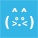
<style>
.page{position:relative;width:38px;height:38px;background:#33b5e5}
.page>*{position:absolute;margin:0}
.t1{font:14.2px "Arial-BoldMT";color:#ffffff}
.t2{font:14.2px "ArialMT";color:#ffffff}
.t3{font:10.7px "Arial-BoldMT";color:#ffffff}
.t4{font:5.3px "ArialMT";color:#ffffff}
.t5{font:9px "ArialMT";color:#ffffff}
</style>
<div class="page">
<p class="t1" style="left:5px;top:16px;width:29px;height:13px"><span class="t2"> </span>(  .  )</p>
<p class="t3" style="left:12px;top:8px;width:15px;height:4px">^ ^</p>
<p class="t4" style="left:15px;top:17px;width:10px;height:4px">o  o</p>
<p class="t5" style="left:12px;top:21px;width:16px;height:5px">&gt;  &lt;</p>
</div>
